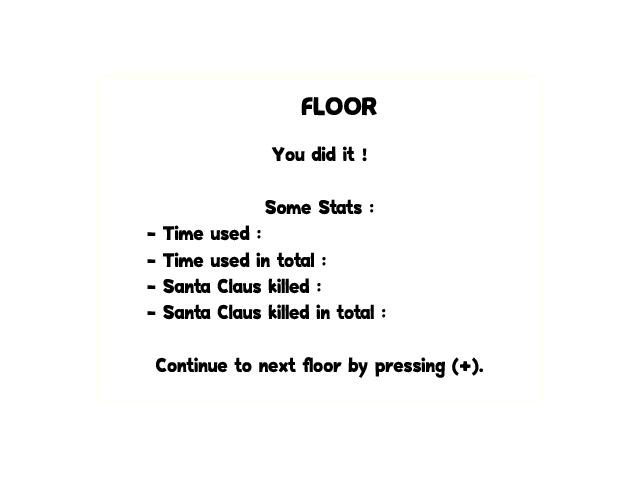
<style>
.page{position:relative;width:640px;height:480px;background:#ffffff}
.page>*{position:absolute;margin:0}
.t1{font:22px "HappyHell";color:#000000}
.t2{font:28px "HappyHell";color:#ffffff}
.t3{font:28px "HappyHell";color:#000000}
</style>
<div class="page">
<p class="t1" style="left:147px;top:97px;width:336px;height:281px;text-align:center"><span class="t2">.....</span><span class="t3"> FLOOR<br><br></span>You did it ! <br><br>Some Stats :<br> - Time used :<br> - Time used in total :<br> - Santa Claus killed :<br> - Santa Claus killed in total : <br><br>Continue to next floor by pressing (+).</p>
</div>
